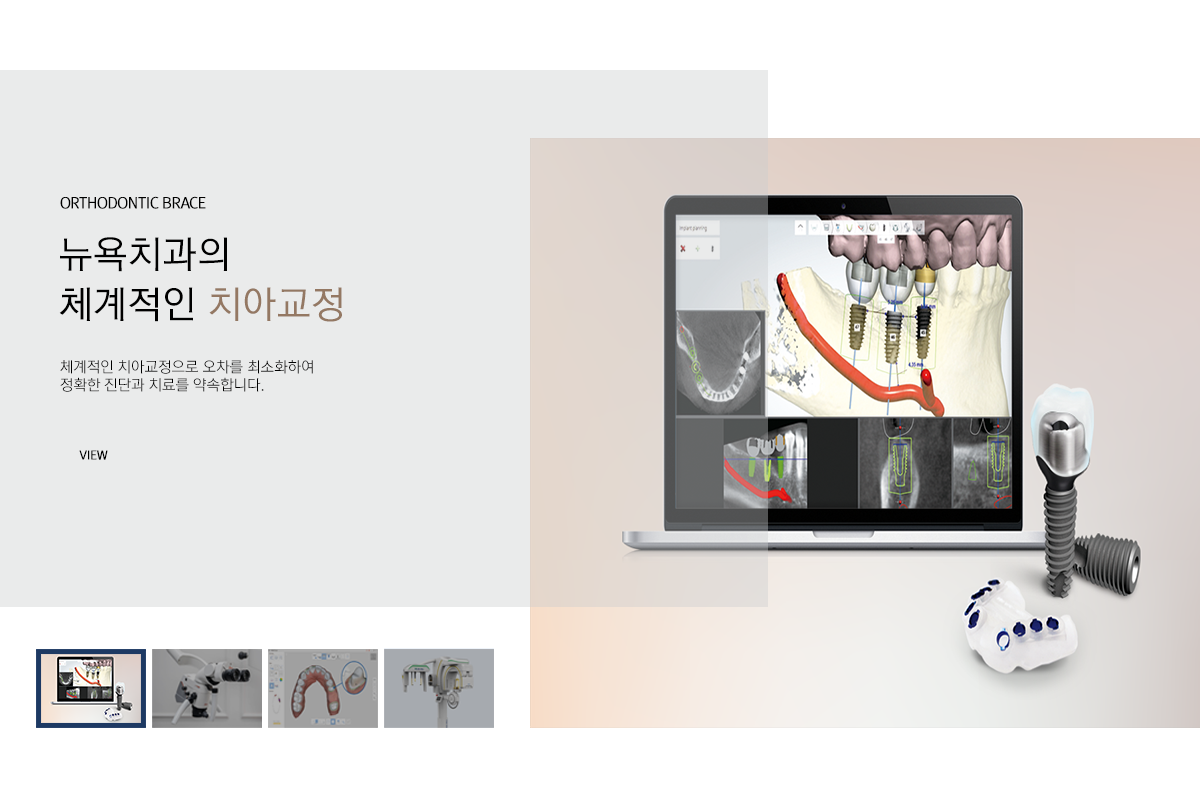
<style>
.page{position:relative;width:1200px;height:800px;background:#eaebeb}
.page>*{position:absolute;margin:0}
.t1{font:15px "RixMGoL";letter-spacing:-0.05em;color:#000000;font-weight:bold}
.t2{font:37.3px/50px "RixGoL";color:#000000;font-weight:bold}
.t3{font:37.3px/50px "RixGoL";color:#947863;font-weight:bold}
.t4{font:15px "RixMGoL";color:#000000}
.t5{font:12px "RixMGoL";letter-spacing:-0.04em;color:#000000;font-weight:bold}
</style>
<div class="page">
<p class="t1" style="left:60px;top:196px;width:146px;height:13px">ORTHODONTIC BRACE</p>
<p class="t2" style="left:59px;top:237px;width:283px;height:85px">뉴욕치과의 <br>체계적인 <span class="t3">치아교정</span></p>
<p class="t4" style="left:60px;top:360px;width:253px;height:32px">체계적인 치아교정으로 오차를 최소화하여<br>정확한 진단과 치료를 약속합니다.</p>
<p class="t5" style="left:79px;top:450px;width:29px;height:10px">VIEW</p>
</div>
